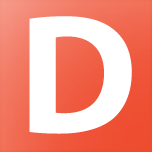
<style>
.page{position:relative;width:152px;height:152px;background:#ffffff}
.page>*{position:absolute;margin:0}
.t1{font:171px "MyriadPro-Bold";color:#ffffff}
</style>
<div class="page">
<p class="t1" style="left:29px;top:16px;width:103px;height:118px">D</p>
</div>
